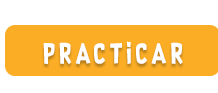
<style>
.page{position:relative;width:218px;height:93px;background:#ffffff}
.page>*{position:absolute;margin:0}
.t1{font:23.8px "SupersonicRocketship";letter-spacing:0.18em;color:#ffffff}
</style>
<div class="page">
<p class="t1" style="left:43px;top:41px;width:140px;height:24px">PRACTICAR</p>
</div>
